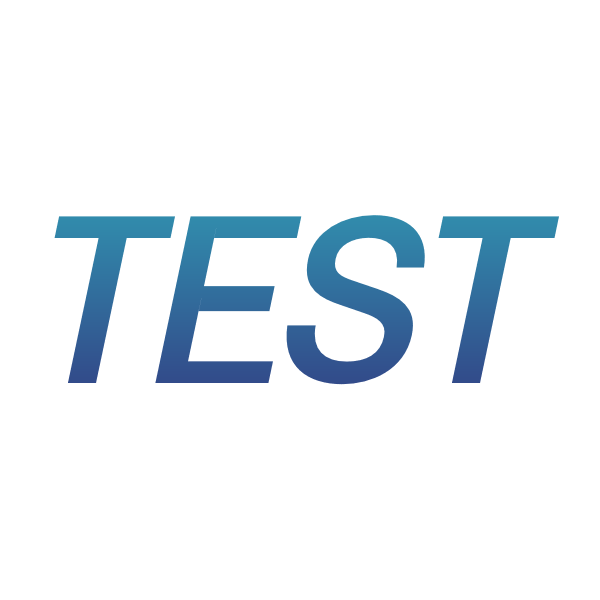
<style>
.page{position:relative;width:600px;height:600px;background:#ffffff}
.page>*{position:absolute;margin:0}
.t1{font:238px "BauhausManifest-BoldItalic"}
</style>
<div class="page">
<p class="t1" style="left:54px;top:215px;width:505px;height:170px">TEST</p>
</div>
